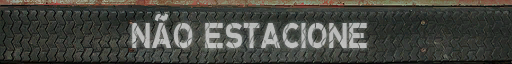
<style>
.page{position:relative;width:512px;height:64px}
.page>*{position:absolute;margin:0}
.t1{font:60.3px "PaperTigerSans-Regular";letter-spacing:0.01em;color:#babbba;scale:0.69 1}
</style>
<div class="page">
<p class="t1" style="left:132px;top:13px;width:235px;height:35px">NÃO ESTACIONE</p>
</div>
